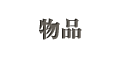
<style>
.page{position:relative;width:120px;height:57px;background:#ffffff}
.page>*{position:absolute;margin:0}
.t1{font:22px "RyuminPr6N-ExBold";color:#66615a;font-weight:bold}
</style>
<div class="page">
<p class="t1" style="left:39px;top:18px;width:43px;height:22px">物品</p>
</div>
